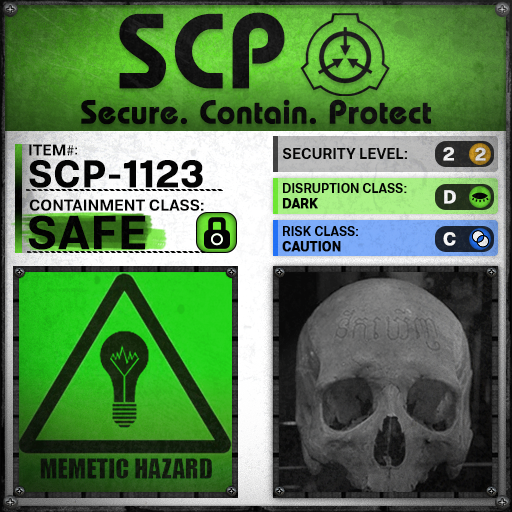
<style>
.page{position:relative;width:512px;height:512px}
.page>*{position:absolute;margin:0}
.t1{font:105.8px "BauhausLT-Demi";color:#000000;font-weight:bold}
.t2{font:33px "BauhausLT-Demi";color:#000000;font-weight:bold}
.t3{font:15.7px "Molde-Semibold";color:#000000}
.t4{font:15.7px "MyriadPro-Regular";color:#000000}
.t5{font:13.7px "Molde-Semibold";color:#000000}
.t6{font:15px "Molde-Semibold";color:#000000}
.t7{font:18.6px "Molde-Semibold";color:#ffffff;font-weight:bold}
.t8{font:17.8px "Molde-Semibold";color:#d7d8d7;font-weight:bold}
.t9{font:38.2px "Molde-Semibold";color:#000000;font-weight:bold}
.t10{font:12.8px "Molde-Semibold";color:#000000}
.t11{font:12.8px "Molde-Semibold";color:#000000;font-weight:bold}
.t12{font:15.9px "Molde-Semibold";color:#000000}
.t13{font:47.2px "Molde-Semibold";color:#000000;font-weight:bold}
</style>
<div class="page">
<p class="t1" style="left:119px;top:12px;width:166px;height:77px">SCP</p>
<p class="t2" style="left:81px;top:99px;width:350px;height:26px">Secure. Contain. Protect</p>
<p class="t3" style="left:29px;top:144px;width:45px;height:12px">ITEM<span class="t4">#</span></p>
<p class="t5" style="left:75px;top:147px;width:2px;height:8px">:</p>
<p class="t6" style="left:283px;top:148px;width:124px;height:11px">SECURITY LEVEL:</p>
<p class="t7" style="left:443px;top:147px;width:11px;height:14px">2</p>
<p class="t8" style="left:475px;top:147px;width:11px;height:14px">2</p>
<p class="t9" style="left:29px;top:160px;width:174px;height:28px">SCP-1123</p>
<p class="t10" style="left:282px;top:183px;width:125px;height:26px">DISRUPTION CLASS:<br><span class="t11">DARK</span></p>
<p class="t7" style="left:444px;top:190px;width:12px;height:14px">D</p>
<p class="t12" style="left:29px;top:199px;width:175px;height:12px">CONTAINMENT CLASS:</p>
<p class="t13" style="left:28px;top:215px;width:118px;height:35px">SAFE</p>
<p class="t10" style="left:282px;top:226px;width:76px;height:26px">RISK CLASS:<br><span class="t11">CAUTION</span></p>
<p class="t7" style="left:443px;top:232px;width:13px;height:14px">C</p>
</div>
